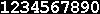
<style>
.page{position:relative;width:100px;height:14px;background:#000000}
.page>*{position:absolute;margin:0}
.t1{font:18px "CourierNewPS-BoldMT";color:#ffffff}
</style>
<div class="page">
<p class="t1" style="left:1px;top:1px;width:8px;height:12px">1</p>
<p class="t1" style="left:11px;top:1px;width:8px;height:12px">2</p>
<p class="t1" style="left:20px;top:1px;width:9px;height:12px">3</p>
<p class="t1" style="left:31px;top:1px;width:8px;height:12px">4</p>
<p class="t1" style="left:40px;top:1px;width:9px;height:12px">5</p>
<p class="t1" style="left:51px;top:1px;width:8px;height:12px">6</p>
<p class="t1" style="left:61px;top:1px;width:8px;height:12px">7</p>
<p class="t1" style="left:71px;top:1px;width:8px;height:12px">8</p>
<p class="t1" style="left:81px;top:1px;width:8px;height:12px">9</p>
<p class="t1" style="left:91px;top:1px;width:8px;height:12px">0</p>
</div>
